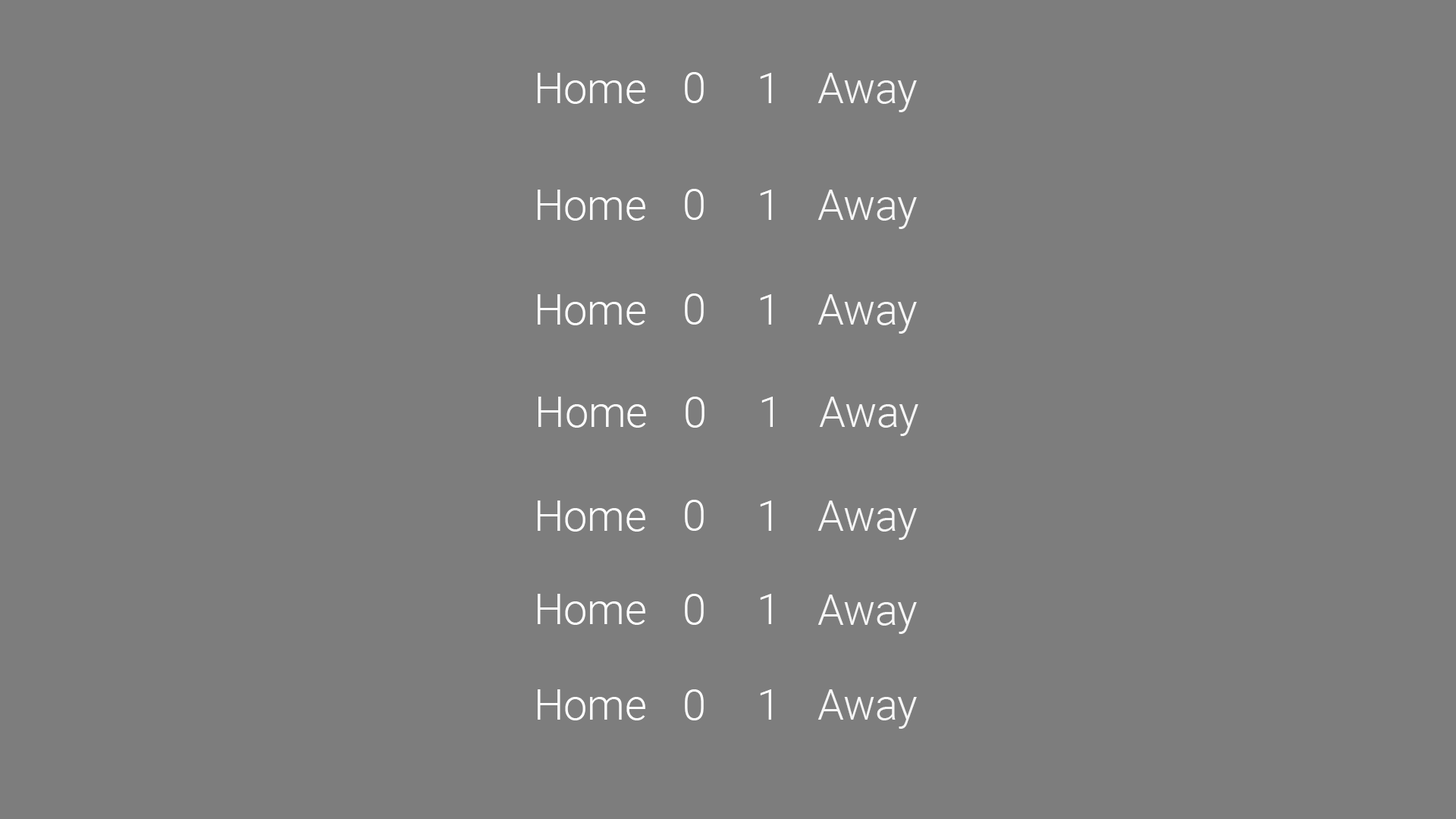
<style>
.page{position:relative;width:1456px;height:819px;background:#7d7d7d}
.page>*{position:absolute;margin:0}
.t1{font:42.1px "Roboto-Light";color:#ffffff}
.t2{font:42.1px "Roboto-Light";color:#f7f7f7}
</style>
<div class="page">
<p class="t1" style="left:538px;top:73px;width:107px;height:31px">Home</p>
<p class="t1" style="left:685px;top:72px;width:19px;height:31px">0</p>
<p class="t1" style="left:760px;top:73px;width:11px;height:30px">1</p>
<p class="t2" style="left:817px;top:73px;width:100px;height:39px">Away</p>
<p class="t1" style="left:538px;top:190px;width:107px;height:31px">Home</p>
<p class="t1" style="left:685px;top:189px;width:19px;height:31px">0</p>
<p class="t1" style="left:760px;top:190px;width:11px;height:30px">1</p>
<p class="t2" style="left:817px;top:190px;width:100px;height:39px">Away</p>
<p class="t1" style="left:685px;top:293px;width:19px;height:32px">0</p>
<p class="t1" style="left:538px;top:294px;width:107px;height:31px">Home</p>
<p class="t1" style="left:760px;top:294px;width:11px;height:31px">1</p>
<p class="t2" style="left:817px;top:294px;width:100px;height:40px">Away</p>
<p class="t1" style="left:538px;top:397px;width:108px;height:31px">Home</p>
<p class="t1" style="left:686px;top:397px;width:18px;height:31px">0</p>
<p class="t1" style="left:761px;top:397px;width:12px;height:30px">1</p>
<p class="t2" style="left:819px;top:397px;width:99px;height:39px">Away</p>
<p class="t1" style="left:538px;top:500px;width:107px;height:32px">Home</p>
<p class="t1" style="left:685px;top:500px;width:19px;height:31px">0</p>
<p class="t1" style="left:760px;top:500px;width:11px;height:31px">1</p>
<p class="t2" style="left:817px;top:500px;width:100px;height:40px">Away</p>
<p class="t1" style="left:538px;top:594px;width:107px;height:31px">Home</p>
<p class="t1" style="left:685px;top:594px;width:19px;height:31px">0</p>
<p class="t1" style="left:760px;top:594px;width:11px;height:30px">1</p>
<p class="t2" style="left:817px;top:595px;width:100px;height:39px">Away</p>
<p class="t1" style="left:538px;top:689px;width:107px;height:31px">Home</p>
<p class="t1" style="left:685px;top:689px;width:19px;height:31px">0</p>
<p class="t1" style="left:760px;top:689px;width:11px;height:31px">1</p>
<p class="t2" style="left:817px;top:689px;width:100px;height:40px">Away</p>
</div>
